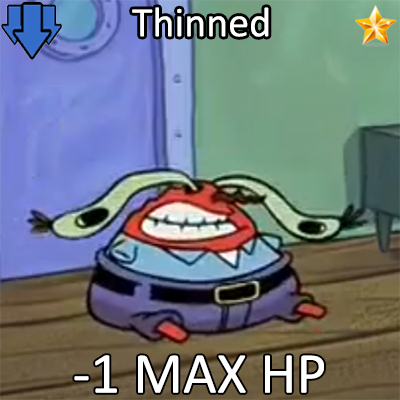
<style>
.page{position:relative;width:400px;height:400px}
.page>*{position:absolute;margin:0}
.t1{font:72px "Calibri";color:#ffffff}
.t2{font:100px "Calibri";color:#ffffff}
</style>
<div class="page">
<p class="t1" style="left:132px;top:7px;width:137px;height:30px">Thinned</p>
<p class="t2" style="left:74px;top:355px;width:250px;height:38px">-1 MAX HP</p>
</div>
